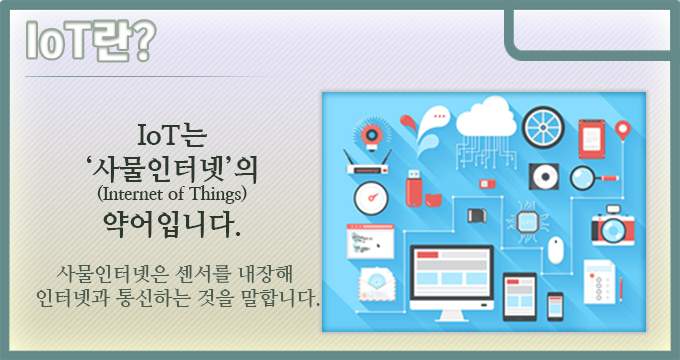
<style>
.page{position:relative;width:680px;height:360px}
.page>*{position:absolute;margin:0}
.t1{font:44px "KoreanTITGD5-R";letter-spacing:-0.01em;color:#ffffff}
.t2{font:18px "NanumMyeongjoExtraBold";letter-spacing:-0.01em;color:#2a382e}
.t3{font:28px "NanumMyeongjoExtraBold";letter-spacing:-0.01em;color:#2a382e}
.t4{font:20px "NanumMyeongjoBold";letter-spacing:-0.01em;color:#495a4e}
</style>
<div class="page">
<p class="t1" style="left:28px;top:21px;width:127px;height:40px">IoT란?</p>
<p class="t2" style="left:86px;top:122px;width:171px;height:117px;text-align:center"><span class="t3">IoT는 <br>‘사물인터넷’의<br></span>(Internet of Things)<br><span class="t3">약어입니다.</span></p>
<p class="t4" style="left:36px;top:264px;width:284px;height:44px;text-align:center">사물인터넷은 센서를 내장해 <br>인터넷과 통신하는 것을 말합니다.</p>
</div>
